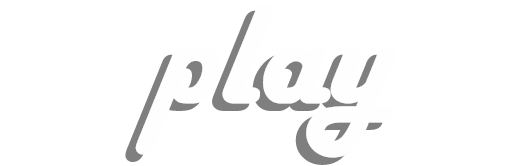
<style>
.page{position:relative;width:523px;height:166px;background:#ffffff}
.page>*{position:absolute;margin:0}
.t1{font:150px "HarlowSolid"}
</style>
<div class="page">
<p class="t1" style="left:125px;top:10px;width:260px;height:155px">play</p>
</div>
